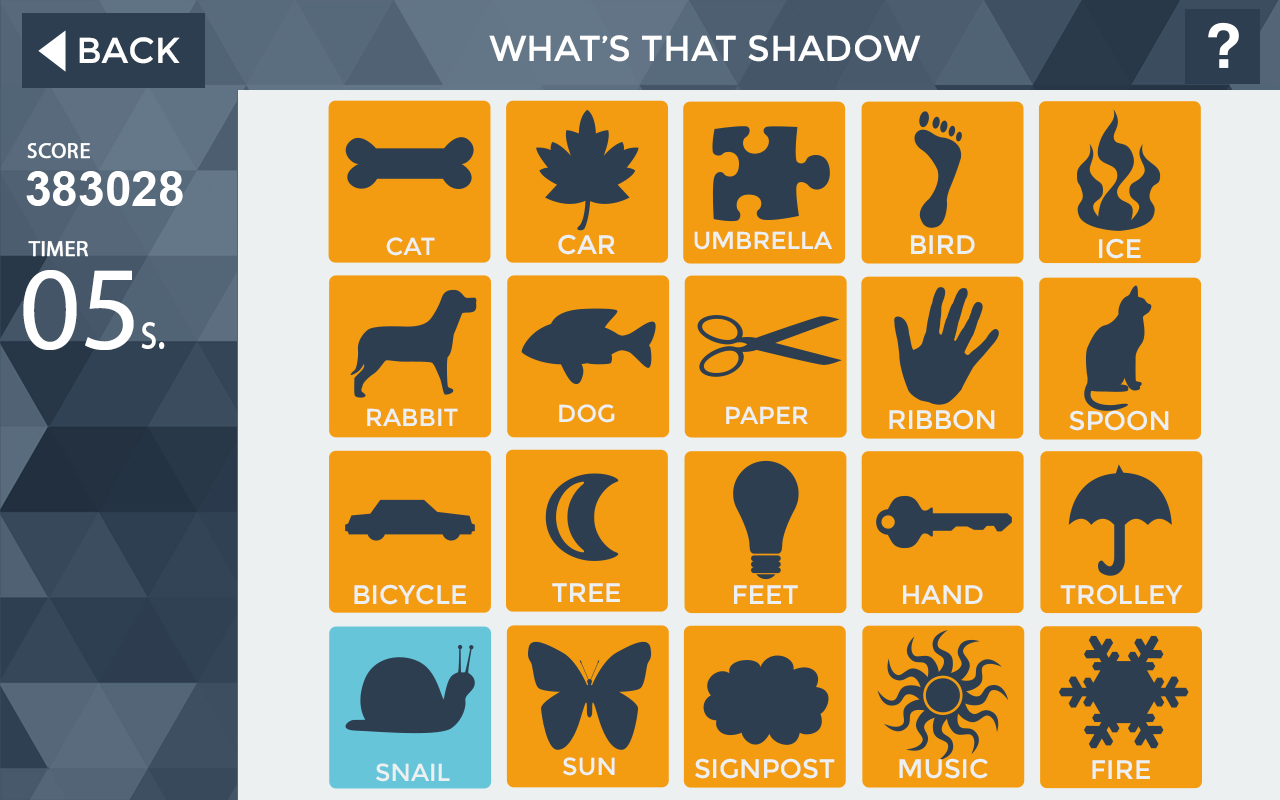
<style>
.page{position:relative;width:1280px;height:800px;background:#f39c11}
.page>*{position:absolute;margin:0}
.t1{font:36px "Montserrat-Regular";color:#ffffff}
.t2{font:36px "Montserrat-Regular";color:#ffffff;text-transform:uppercase}
.t3{font:22px "MyriadPro-Regular";color:#ffffff;font-weight:bold}
.t4{font:48px "Arial-BoldMT";color:#ffffff}
.t5{font:24.5px "Montserrat-Regular";color:#ecf0f1;text-transform:uppercase}
.t6{font:26.7px "Montserrat-Regular";color:#ecf0f1;text-transform:uppercase}
.t7{font:120px "MyriadPro-Regular";color:#ffffff}
.t8{font:55px "MyriadPro-Regular";color:#ffffff;scale:0.8 1}
</style>
<div class="page">
<p class="t1" style="left:79px;top:37px;width:101px;height:27px">BACK</p>
<p class="t2" style="left:489px;top:35px;width:432px;height:27px">What’s that shadow</p>
<p class="t3" style="left:27px;top:143px;width:63px;height:16px">SCORE</p>
<p class="t4" style="left:26px;top:171px;width:157px;height:35px">383028</p>
<p class="t5" style="left:694px;top:231px;width:139px;height:19px">umbrella</p>
<p class="t3" style="left:28px;top:241px;width:60px;height:16px">TIMER</p>
<p class="t5" style="left:386px;top:237px;width:49px;height:19px">cat</p>
<p class="t6" style="left:558px;top:234px;width:57px;height:21px">car</p>
<p class="t6" style="left:911px;top:235px;width:64px;height:19px">bird</p>
<p class="t6" style="left:1099px;top:238px;width:42px;height:21px">ice</p>
<p class="t7" style="left:23px;top:270px;width:111px;height:80px">05</p>
<p class="t8" style="left:141px;top:322px;width:24px;height:27px">s.</p>
<p class="t5" style="left:367px;top:408px;width:91px;height:18px">rabbit</p>
<p class="t5" style="left:559px;top:404px;width:56px;height:19px">dog</p>
<p class="t5" style="left:726px;top:406px;width:82px;height:18px">paper</p>
<p class="t6" style="left:889px;top:409px;width:106px;height:21px">ribbon</p>
<p class="t6" style="left:1069px;top:410px;width:100px;height:21px">spoon</p>
<p class="t6" style="left:354px;top:584px;width:112px;height:21px">bicycle</p>
<p class="t6" style="left:552px;top:583px;width:68px;height:19px">tree</p>
<p class="t6" style="left:734px;top:585px;width:64px;height:19px">feet</p>
<p class="t6" style="left:903px;top:585px;width:80px;height:19px">hand</p>
<p class="t6" style="left:1060px;top:584px;width:123px;height:21px">trolley</p>
<p class="t5" style="left:563px;top:757px;width:52px;height:19px">Sun</p>
<p class="t6" style="left:695px;top:758px;width:140px;height:21px">signpost</p>
<p class="t6" style="left:899px;top:758px;width:89px;height:21px">music</p>
<p class="t6" style="left:1092px;top:760px;width:58px;height:19px">fire</p>
<p class="t5" style="left:376px;top:763px;width:74px;height:19px">snail</p>
</div>
